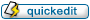
<style>
.page{position:relative;width:90px;height:20px;background:#ffffff}
.page>*{position:absolute;margin:0}
.t1{font:10.8px "ArialMT";letter-spacing:0.025em;color:#006699;scale:1.11 1}
</style>
<div class="page">
<p class="t1" style="left:27px;top:6px;width:50px;height:11px">quickedit</p>
</div>
